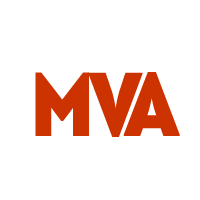
<style>
.page{position:relative;width:200px;height:200px;background:#ffffff}
.page>*{position:absolute;margin:0}
.t1{font:90px "IntroCondBlackFree";color:#cc3300}
</style>
<div class="page">
<p class="t1" style="left:35px;top:72px;width:145px;height:65px">MVA</p>
</div>
